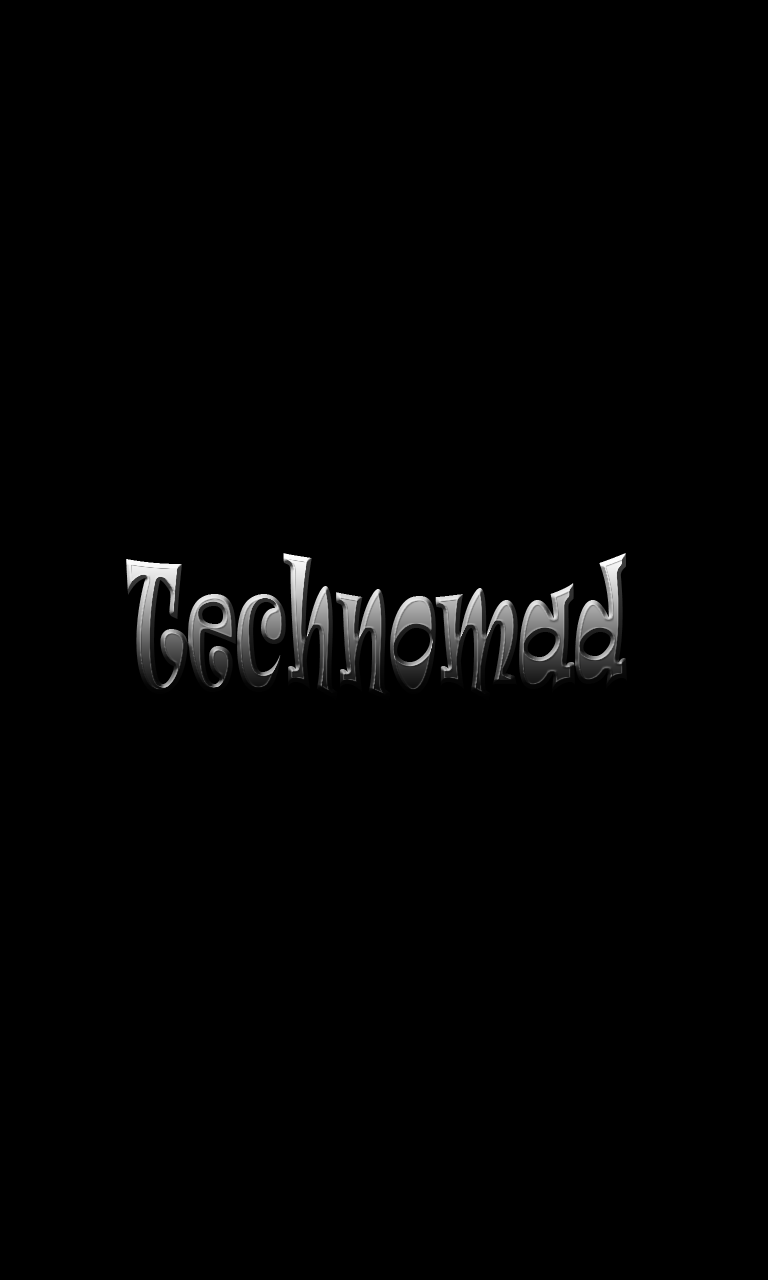
<style>
.page{position:relative;width:768px;height:1280px;background:#000000}
.page>*{position:absolute;margin:0}
.t1{font:162.6px "Ravie";scale:0.42 1}
</style>
<div class="page">
<p class="t1" style="left:126px;top:553px;width:501px;height:148px">Technomad</p>
</div>
